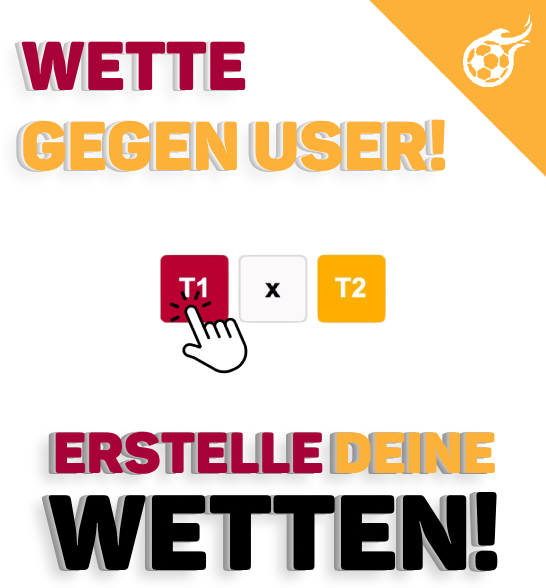
<style>
.page{position:relative;width:546px;height:588px;background:#ffffff}
.page>*{position:absolute;margin:0}
.t1{font:68px "Panton-BlackCaps";color:#feb139}
.t2{font:68px "Panton-BlackCaps";color:#a80038}
.t3{font:56.9px "Panton-BlackCaps";color:#a80038}
.t4{font:56.9px "Panton-BlackCaps";color:#feb139}
.t5{font:105.4px "Panton-BlackCaps";color:#000000}
</style>
<div class="page">
<p class="t1" style="left:21px;top:41px;width:425px;height:131px"><span class="t2">Wette <br></span>gegen User!</p>
<p class="t3" style="left:48px;top:431px;width:450px;height:140px;text-align:center">Erstelle <span class="t4">deine<br></span><span class="t5">Wetten!</span></p>
</div>
